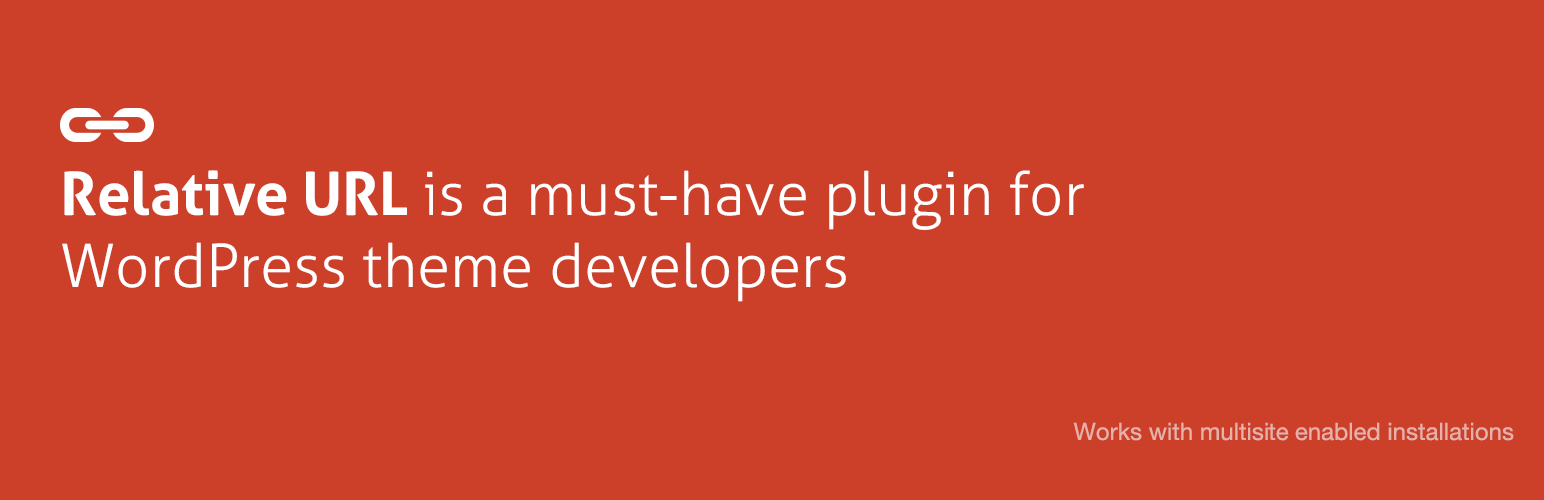
<style>
.page{position:relative;width:1544px;height:500px;background:#cc4029}
.page>*{position:absolute;margin:0}
.t1{font:60px "Aller-Light";color:#ffffff}
.t2{font:60px "Aller-Bold";color:#ffffff}
.t3{font:24px "HelveticaNeue";color:#e6b1ab}
</style>
<div class="page">
<p class="t1" style="left:62px;top:170px;width:1022px;height:132px"><span class="t2">Relative URL </span>is a must-have plugin for<br>WordPress theme developers</p>
<p class="t3" style="left:1073px;top:422px;width:441px;height:19px">Works with multisite enabled installations</p>
</div>
